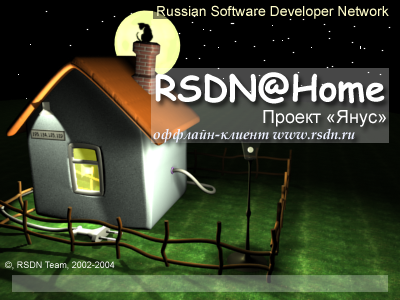
<style>
.page{position:relative;width:400px;height:300px;background:#000000}
.page>*{position:absolute;margin:0}
.t1{font:14px "ArialMT";color:#fffdca}
.t2{font:36px "ComicSansMS-Bold";color:#ffffff}
.t3{font:18px "ArialMT";color:#ffffff}
.t4{font:14px "BookAntiqua-BoldItalic";color:#ecf0ff}
.t5{font:9px "ArialMT"}
</style>
<div class="page">
<p class="t1" style="left:157px;top:5px;width:232px;height:14px">Russian Software Developer Network</p>
<p class="t2" style="left:155px;top:72px;width:230px;height:32px">RSDN@Home</p>
<p class="t3" style="left:263px;top:110px;width:123px;height:17px">Проект «Янус»</p>
<p class="t4" style="left:153px;top:128px;width:202px;height:15px">оффлайн-клиент www.rsdn.ru</p>
<p class="t5" style="left:5px;top:261px;width:110px;height:9px">©, RSDN Team, 2002-2004</p>
</div>
